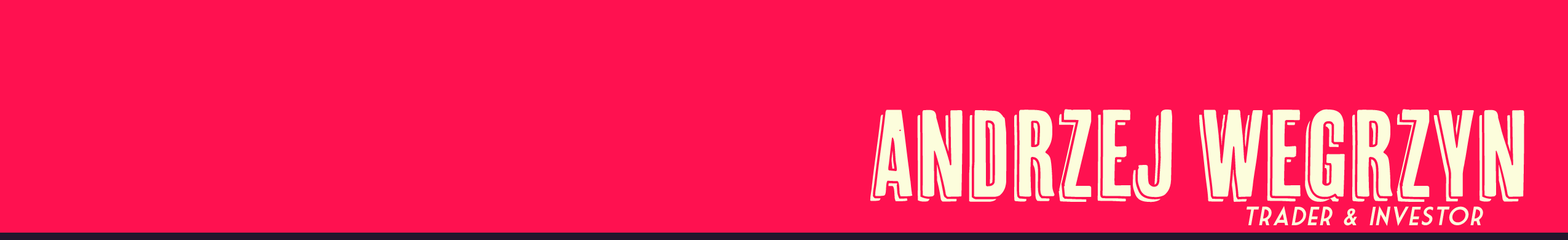
<style>
.page{position:relative;width:1568px;height:240px;background:#ff1150}
.page>*{position:absolute;margin:0}
.t1{font:122.9px "CheapPine";letter-spacing:0.01em;color:#fcfddc}
.t2{font:25.6px "MarketDeco";letter-spacing:0.025em;color:#fcfddc;font-style:italic}
</style>
<div class="page">
<p class="t1" style="left:870px;top:109px;width:654px;height:93px">Andrzej Wegrzyn</p>
<p class="t2" style="left:1247px;top:205px;width:236px;height:21px">Trader &amp; Investor</p>
</div>
